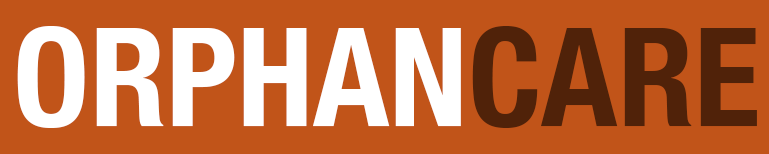
<style>
.page{position:relative;width:769px;height:154px;background:#c15419}
.page>*{position:absolute;margin:0}
.t1{font:137px "HelveticaNeue-CondensedBold";color:#ffffff;text-transform:uppercase}
.t2{font:137px "HelveticaNeue-CondensedBold";color:#502209;text-transform:uppercase}
</style>
<div class="page">
<p class="t1" style="left:17px;top:26px;width:740px;height:102px">ORPHAN<span class="t2">CARE</span></p>
</div>
